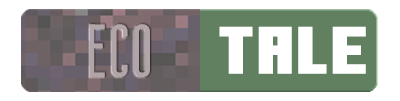
<style>
.page{position:relative;width:400px;height:101px;background:#ffffff}
.page>*{position:absolute;margin:0}
.t1{font:75px "Bondie-Regular";color:#b1a5a8}
.t2{font:66.7px "MinecraftTen";color:#ffffff}
</style>
<div class="page">
<p class="t1" style="left:89px;top:24px;width:61px;height:53px">eco</p>
<p class="t2" style="left:219px;top:26px;width:147px;height:48px">Tale</p>
</div>
